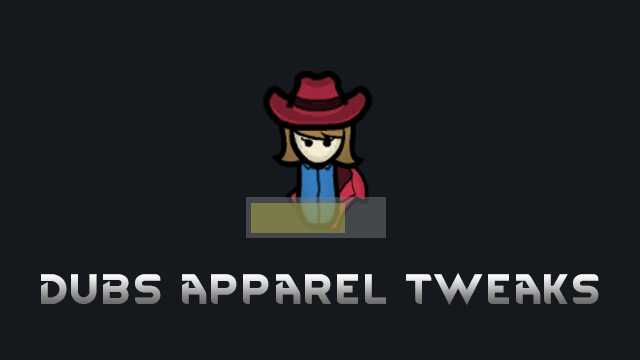
<style>
.page{position:relative;width:640px;height:360px;background:#15191d}
.page>*{position:absolute;margin:0}
.t1{font:36.2px "RimWordFont";letter-spacing:0.01em}
</style>
<div class="page">
<p class="t1" style="left:41px;top:273px;width:558px;height:32px">Dubs apparel tweaks</p>
</div>
